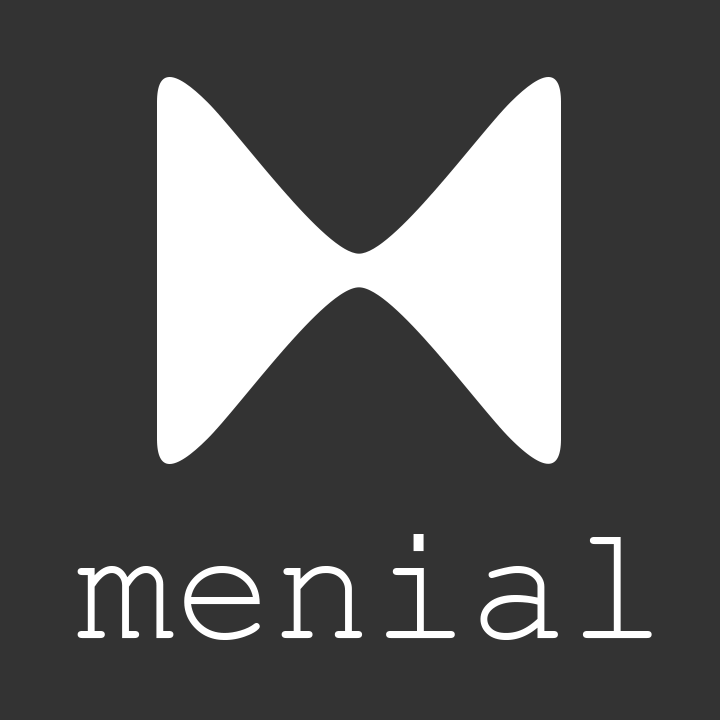
<style>
.page{position:relative;width:720px;height:720px;background:#333333}
.page>*{position:absolute;margin:0}
.t1{font:163.8px "CourierNewPSMT";color:#ffffff}
</style>
<div class="page">
<p class="t1" style="left:77px;top:534px;width:575px;height:106px">menial</p>
</div>
